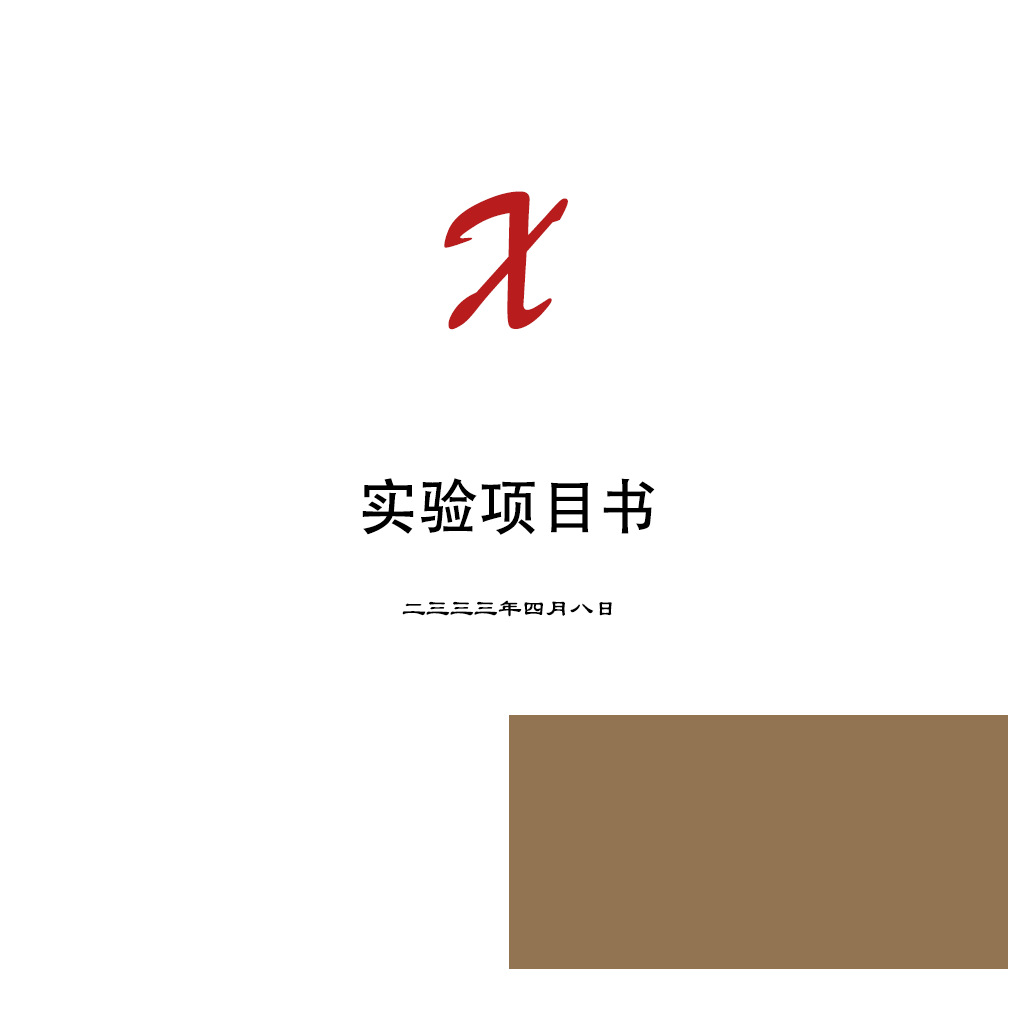
<style>
.page{position:relative;width:1024px;height:1024px;background:#ffffff}
.page>*{position:absolute;margin:0}
.t1{font:200px "STXingkai";color:#b81c1c}
.t2{font:60px "AdobeHeitiStd-Regular";color:#000000}
.t3{font:24px "LiSu";color:#000000}
</style>
<div class="page">
<p class="t1" style="left:444px;top:191px;width:124px;height:139px">X</p>
<p class="t2" style="left:362px;top:478px;width:293px;height:57px">实验项目书</p>
<p class="t3" style="left:402px;top:600px;width:210px;height:17px">二三三三年四月八日</p>
</div>
